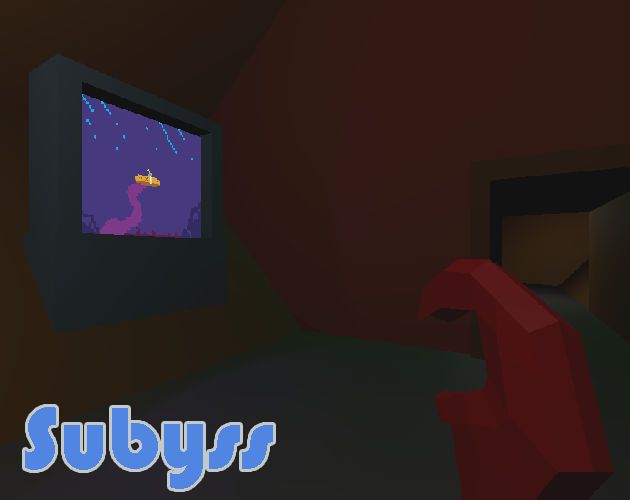
<style>
.page{position:relative;width:630px;height:500px}
.page>*{position:absolute;margin:0}
.t1{font:90px "Bauhaus93";color:#5086e2}
</style>
<div class="page">
<p class="t1" style="left:25px;top:407px;width:248px;height:82px">Subyss</p>
</div>
